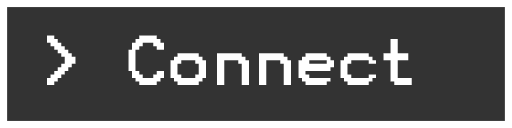
<style>
.page{position:relative;width:512px;height:128px;background:#333333}
.page>*{position:absolute;margin:0}
.t1{font:56.5px "Terminal";color:#ffffff}
</style>
<div class="page">
<p class="t1" style="left:47px;top:35px;width:365px;height:50px">&gt; Connect</p>
</div>
